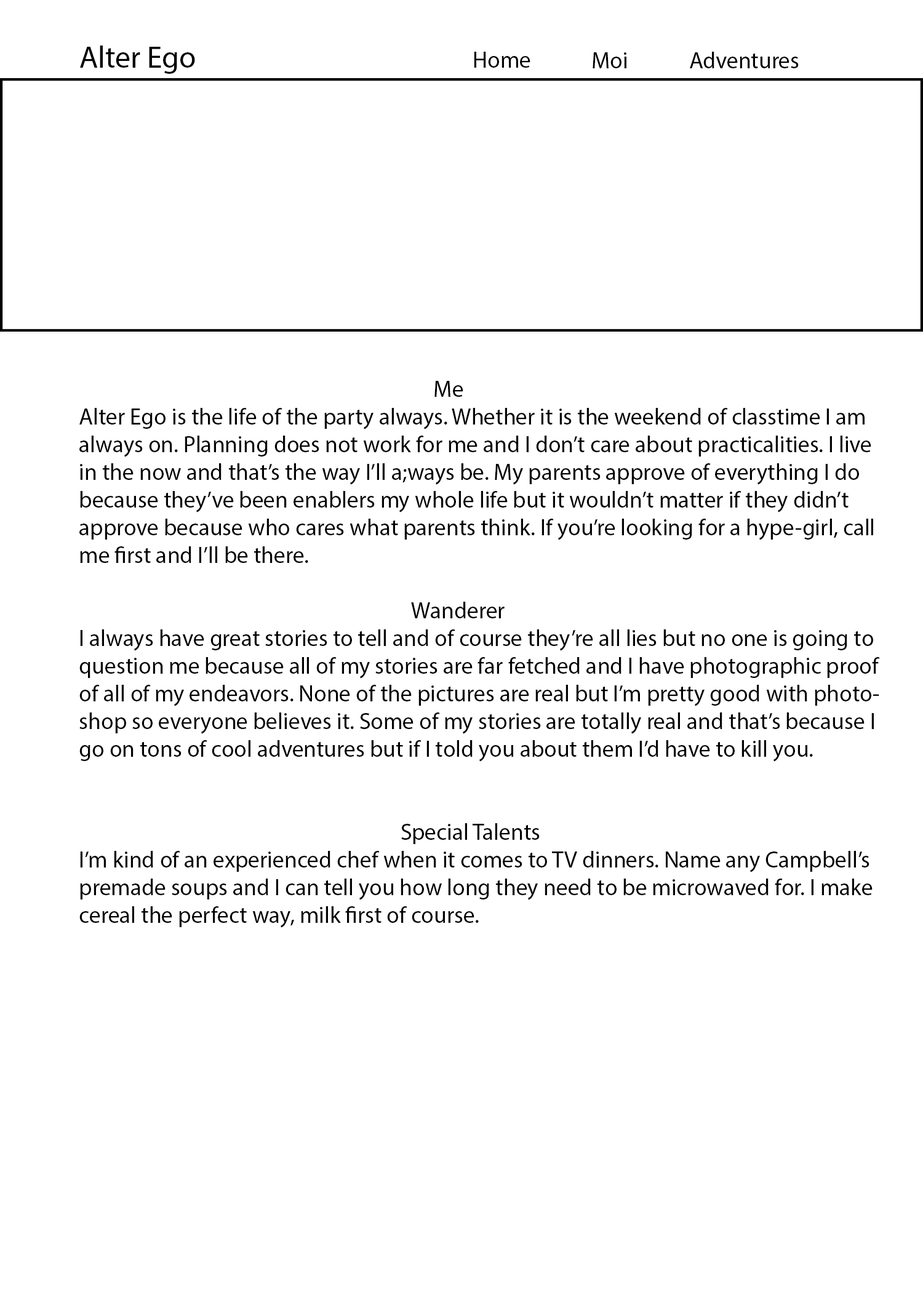
<style>
.page{position:relative;width:923px;height:1292px;background:#ffffff}
.page>*{position:absolute;margin:0}
.t1{font:7.4px "MyriadPro-Regular";color:#000000}
.t2{font:23.1px "MyriadPro-Regular";color:#000000}
</style>
<div class="page">
<p class="t1" style="left:80px;top:46px;width:115px;height:28px">Alter Ego</p>
<p class="t2" style="left:474px;top:52px;width:56px;height:16px">Home</p>
<p class="t2" style="left:592px;top:52px;width:34px;height:16px">Moi</p>
<p class="t2" style="left:690px;top:52px;width:109px;height:16px">Adventures</p>
<p class="t2" style="left:79px;top:381px;width:801px;height:547px">Me<br>Alter Ego is the life of the party always. Whether it is the weekend of classtime I am <br>always on. Planning does not work for me and I don’t care about practicalities. I live<br>in the now and that’s the way I’ll a;ways be. My parents approve of everything I do<br>because they’ve been enablers my whole life but it wouldn’t matter if they didn’t<br>approve because who cares what parents think. If you’re looking for a hype-girl, call <br>me first and I’ll be there. <br><br>               Wanderer<br>I always have great stories to tell and of course they’re all lies but no one is going to <br>question me because all of my stories are far fetched and I have photographic proof <br>of all of my endeavors. None of the pictures are real but I’m pretty good with photo-<br>shop so everyone believes it. Some of my stories are totally real and that’s because I<br>go on tons of cool adventures but if I told you about them I’d have to kill you. <br><br><br>                                        Special Talents<br>I’m kind of an experienced chef when it comes to TV dinners. Name any Campbell’s <br>premade soups and I can tell you how long they need to be microwaved for. I make<br>cereal the perfect way, milk first of course.</p>
</div>
